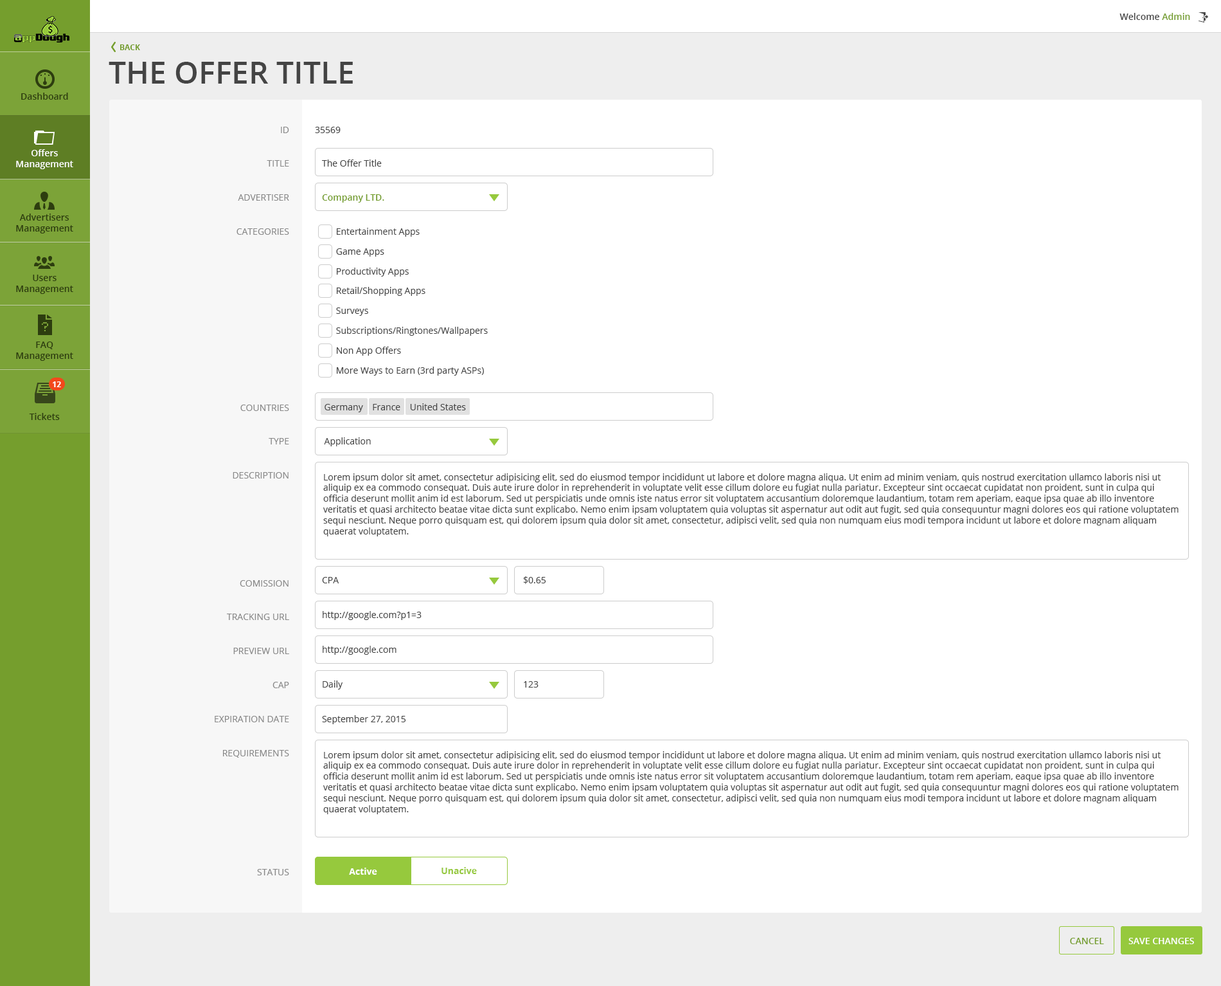
<style>
.page{position:relative;width:1221px;height:986px;background:#ffffff}
.page>*{position:absolute;margin:0}
.t1{font:9px "OpenSans-Semibold";color:#444444}
.t2{font:9px "OpenSans-Semibold";color:#759e2d}
.t3{font:7.7px "OpenSans-Bold";color:#759e2d;text-transform:uppercase}
.t4{font:30.9px "OpenSans-Semibold";color:#444444;text-transform:uppercase}
.t5{font:9px "OpenSans-Semibold";color:#2d3d0f}
.t6{font:9px "OpenSans";color:#888888;text-transform:uppercase}
.t7{font:9px "OpenSans";color:#444444}
.t8{font:9px "OpenSans-Semibold";color:#ffffff}
.t9{font:7.7px "OpenSans-Bold";color:#ffffff}
.t10{font:9px "OpenSans-Bold";color:#ffffff}
.t11{font:9px "OpenSans-Bold";color:#96c93d}
.t12{font:9px "OpenSans-Semibold";color:#759e2d;text-transform:uppercase}
.t13{font:9px "OpenSans-Semibold";color:#ffffff;text-transform:uppercase}
</style>
<div class="page">
<p class="t1" style="left:1120px;top:13px;width:71px;height:7px">Welcome <span class="t2">Admin</span></p>
<p class="t3" style="left:120px;top:44px;width:20px;height:6px">Back</p>
<p class="t4" style="left:109px;top:62px;width:244px;height:22px">The Offer Title</p>
<p class="t5" style="left:21px;top:93px;width:47px;height:7px">Dashboard</p>
<p class="t6" style="left:237px;top:127px;width:52px;height:108px;text-align:right">ID<br>Title<br>Advertiser<br>Categories</p>
<p class="t7" style="left:315px;top:127px;width:173px;height:319px">35569<br>   The Offer Title<br><span class="t2">   Company LTD.<br></span>         Entertainment Apps<br>         Game Apps<br>         Productivity Apps<br>         Retail/Shopping Apps<br>         Surveys<br>         Subscriptions/Ringtones/Wallpapers<br>         Non App Offers<br>         More Ways to Earn (3rd party ASPs)<br><br>    Germany    France    United States<br>    Application</p>
<p class="t8" style="left:16px;top:149px;width:57px;height:20px;text-align:center">Offers Management</p>
<p class="t5" style="left:16px;top:213px;width:57px;height:20px;text-align:center">Advertisers Management</p>
<p class="t5" style="left:16px;top:274px;width:57px;height:20px;text-align:center">Users Management</p>
<p class="t5" style="left:16px;top:341px;width:57px;height:20px;text-align:center">FAQ Management</p>
<p class="t9" style="left:53px;top:381px;width:8px;height:6px">12</p>
<p class="t5" style="left:29px;top:413px;width:31px;height:7px">Tickets</p>
<p class="t6" style="left:233px;top:404px;width:56px;height:74px;text-align:right">Countries<br>Type<br>Description</p>
<p class="t7" style="left:323px;top:473px;width:856px;height:63px">Lorem ipsum dolor sit amet, consectetur adipisicing elit, sed do eiusmod tempor incididunt ut labore et dolore magna aliqua. Ut enim ad minim veniam, quis nostrud exercitation ullamco laboris nisi ut aliquip ex ea commodo consequat. Duis aute irure dolor in reprehenderit in voluptate velit esse cillum dolore eu fugiat nulla pariatur. Excepteur sint occaecat cupidatat non proident, sunt in culpa qui officia deserunt mollit anim id est laborum. Sed ut perspiciatis unde omnis iste natus error sit voluptatem accusantium doloremque laudantium, totam rem aperiam, eaque ipsa quae ab illo inventore veritatis et quasi architecto beatae vitae dicta sunt explicabo. Nemo enim ipsam voluptatem quia voluptas sit aspernatur aut odit aut fugit, sed quia consequuntur magni dolores eos qui ratione voluptatem sequi nesciunt. Neque porro quisquam est, qui dolorem ipsum quia dolor sit amet, consectetur, adipisci velit, sed quia non numquam eius modi tempora incidunt ut labore et dolore magnam aliquam quaerat voluptatem.</p>
<p class="t6" style="left:215px;top:580px;width:74px;height:177px;text-align:right">comission<br>Tracking URL<br>Preview URL<br>CAP<br>Expiration Date<br>Requirements</p>
<p class="t7" style="left:322px;top:577px;width:17px;height:6px">CPA</p>
<p class="t7" style="left:523px;top:576px;width:23px;height:8px">$0.65</p>
<p class="t7" style="left:323px;top:611px;width:99px;height:9px">http://google.com?p1=3</p>
<p class="t7" style="left:323px;top:645px;width:74px;height:9px">http://google.com</p>
<p class="t7" style="left:323px;top:680px;width:20px;height:9px">Daily</p>
<p class="t7" style="left:524px;top:681px;width:15px;height:6px">123</p>
<p class="t7" style="left:322px;top:715px;width:84px;height:9px">September 27, 2015</p>
<p class="t7" style="left:323px;top:751px;width:856px;height:63px">Lorem ipsum dolor sit amet, consectetur adipisicing elit, sed do eiusmod tempor incididunt ut labore et dolore magna aliqua. Ut enim ad minim veniam, quis nostrud exercitation ullamco laboris nisi ut aliquip ex ea commodo consequat. Duis aute irure dolor in reprehenderit in voluptate velit esse cillum dolore eu fugiat nulla pariatur. Excepteur sint occaecat cupidatat non proident, sunt in culpa qui officia deserunt mollit anim id est laborum. Sed ut perspiciatis unde omnis iste natus error sit voluptatem accusantium doloremque laudantium, totam rem aperiam, eaque ipsa quae ab illo inventore veritatis et quasi architecto beatae vitae dicta sunt explicabo. Nemo enim ipsam voluptatem quia voluptas sit aspernatur aut odit aut fugit, sed quia consequuntur magni dolores eos qui ratione voluptatem sequi nesciunt. Neque porro quisquam est, qui dolorem ipsum quia dolor sit amet, consectetur, adipisci velit, sed quia non numquam eius modi tempora incidunt ut labore et dolore magnam aliquam quaerat voluptatem.</p>
<p class="t6" style="left:257px;top:869px;width:32px;height:6px">Status</p>
<p class="t10" style="left:349px;top:867px;width:28px;height:7px">Active</p>
<p class="t11" style="left:442px;top:867px;width:35px;height:7px">Unacive</p>
<p class="t12" style="left:1070px;top:937px;width:34px;height:7px">Cancel</p>
<p class="t13" style="left:1129px;top:937px;width:65px;height:7px">Save Changes</p>
</div>
